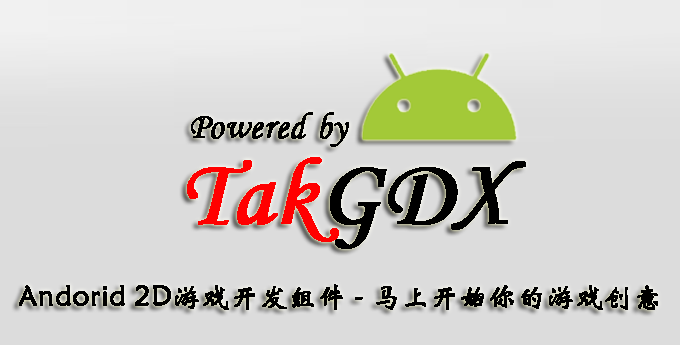
<style>
.page{position:relative;width:680px;height:345px;background:#dcdcdc}
.page>*{position:absolute;margin:0}
.t1{font:36.2px "STLiti";color:#000000;font-weight:bold}
.t2{font:96.4px "STLiti";color:#ff0000;font-weight:bold}
.t3{font:96.4px "STLiti";color:#000000;font-weight:bold}
.t4{font:28px "STXinwei";color:#000000;font-weight:bold}
</style>
<div class="page">
<p class="t1" style="left:191px;top:112px;width:158px;height:35px">Powered by</p>
<p class="t2" style="left:187px;top:157px;width:339px;height:92px">Tak<span class="t3">GDX</span></p>
<p class="t4" style="left:19px;top:284px;width:639px;height:26px">Andorid 2D游戏开发组件 - 马上开始你的游戏创意</p>
</div>
